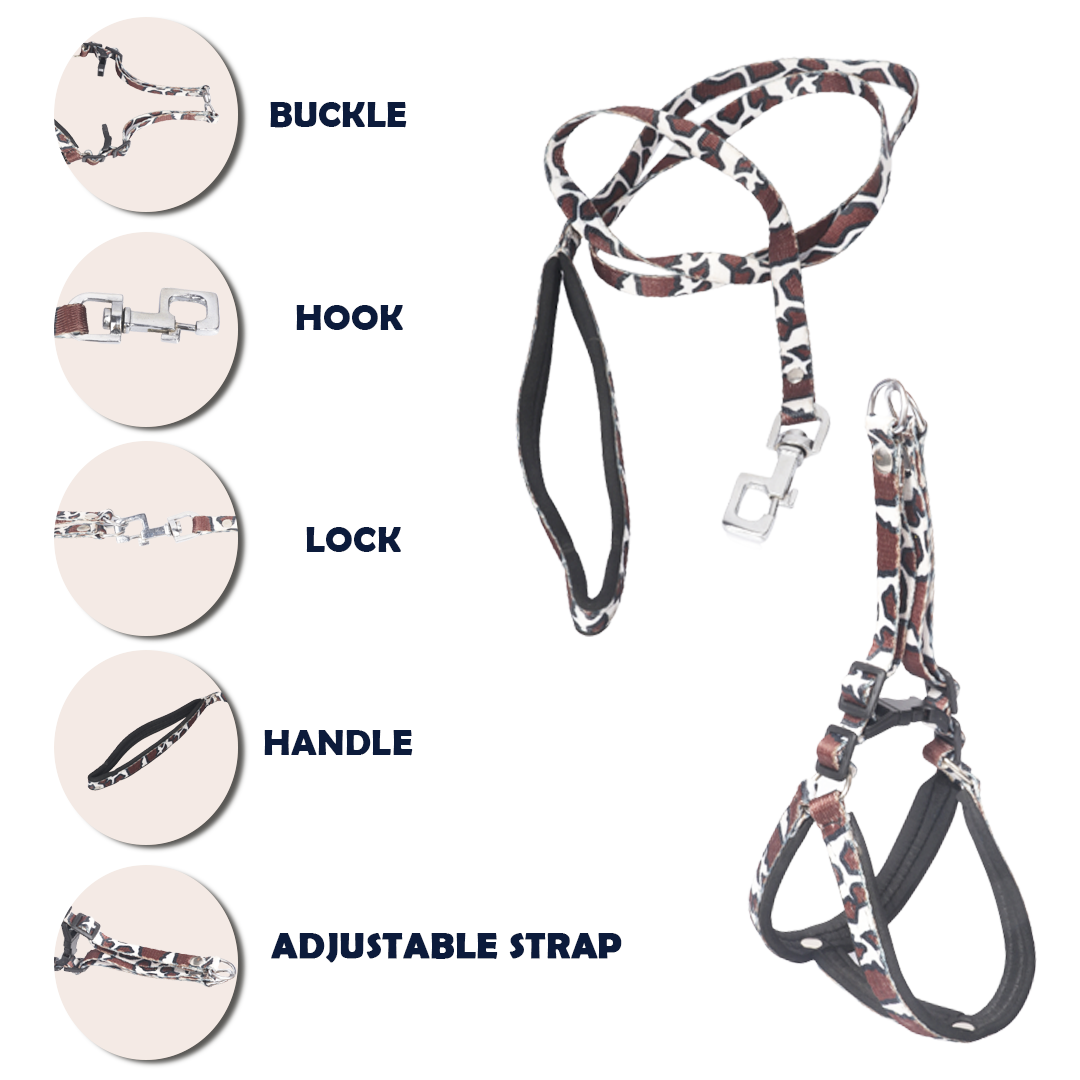
<style>
.page{position:relative;width:1080px;height:1080px;background:#ffffff}
.page>*{position:absolute;margin:0}
.t1{font:37.3px "BerlinSansFBDemi-Bold";letter-spacing:0.001em;color:#0c1b3b}
.t2{font:37.3px "BerlinSansFBDemi-Bold";letter-spacing:0.001em;color:#0c1b3b;font-weight:bold}
</style>
<div class="page">
<p class="t1" style="left:270px;top:102px;width:137px;height:26px">BUCKLE</p>
<p class="t1" style="left:296px;top:305px;width:107px;height:25px">HOOK</p>
<p class="t1" style="left:306px;top:527px;width:95px;height:25px">LOCK</p>
<p class="t1" style="left:264px;top:730px;width:149px;height:26px">HANDLE</p>
<p class="t2" style="left:271px;top:933px;width:351px;height:30px">ADJUSTABLE STRAP</p>
</div>
